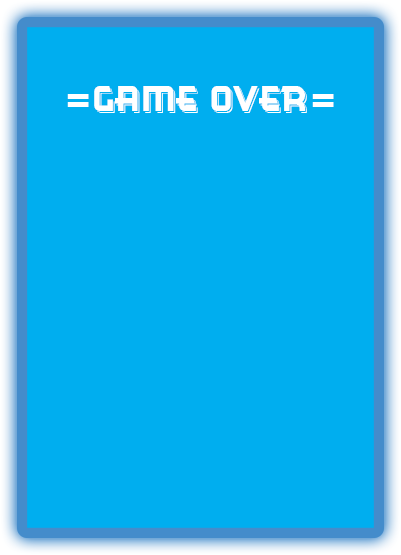
<style>
.page{position:relative;width:401px;height:555px;background:#00aeef}
.page>*{position:absolute;margin:0}
.t1{font:35px "CinemaGothicBTNShadow";color:#ffffff}
</style>
<div class="page">
<p class="t1" style="left:67px;top:86px;width:267px;height:27px">=Game Over=</p>
</div>
